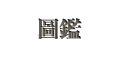
<style>
.page{position:relative;width:120px;height:57px;background:#ffffff}
.page>*{position:absolute;margin:0}
.t1{font:22px "RyuminPr6N-ExBold";color:#66615a;font-weight:bold}
</style>
<div class="page">
<p class="t1" style="left:38px;top:18px;width:44px;height:21px">圖鑑</p>
</div>
